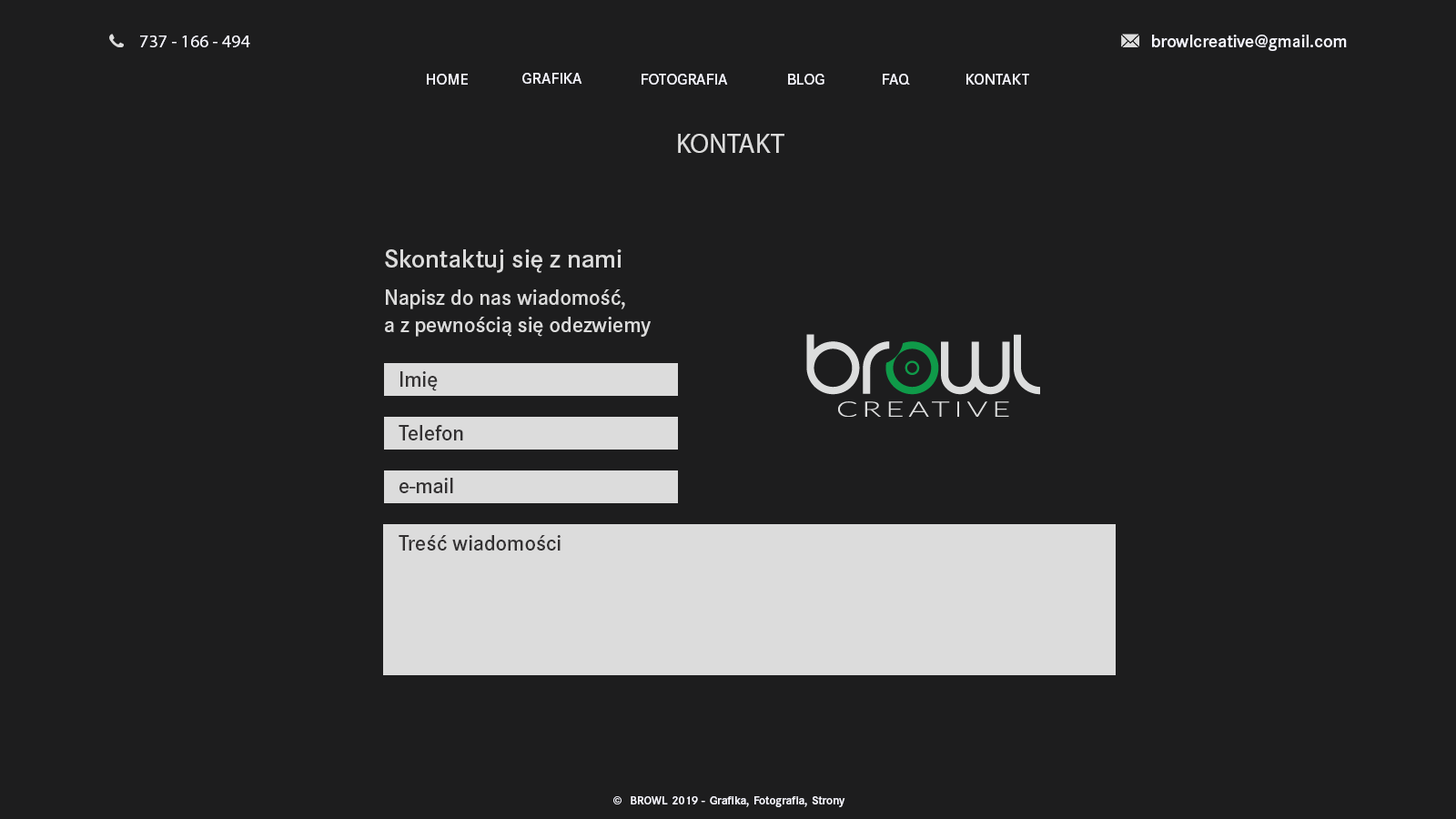
<style>
.page{position:relative;width:1456px;height:819px;background:#1d1d1e}
.page>*{position:absolute;margin:0}
.t1{font:18.2px "MyriadPro-Regular";color:#f7f7ff}
.t2{font:18.2px "CorporateSPro-Demi";color:#f7f7ff}
.t3{font:16.2px "CorporateSPro-Demi";color:#f7f7ff}
.t4{font:27.3px "MyriadPro-Regular";color:#dcdcdc}
.t5{font:26.5px "CorporateSPro-Demi";color:#dcdcdc}
.t6{font:21.8px/27.3px "CorporateSPro-Demi";color:#dcdcdc}
.t7{font:21.8px "CorporateSPro-Demi";color:#333132}
.t8{font:12px "CorporateSPro-Demi";color:#f7f7ff}
</style>
<div class="page">
<p class="t1" style="left:140px;top:35px;width:110px;height:12px">737 - 166 - 494</p>
<p class="t2" style="left:1152px;top:35px;width:195px;height:16px">browlcreative@gmail.com</p>
<p class="t3" style="left:427px;top:74px;width:41px;height:11px;text-align:justify">HOME<br>v</p>
<p class="t3" style="left:522px;top:73px;width:60px;height:11px">GRAFIKA</p>
<p class="t3" style="left:642px;top:74px;width:86px;height:11px">FOTOGRAFIA</p>
<p class="t3" style="left:788px;top:74px;width:36px;height:11px">BLOG</p>
<p class="t3" style="left:883px;top:74px;width:27px;height:11px">FAQ</p>
<p class="t3" style="left:966px;top:74px;width:63px;height:11px">KONTAKT</p>
<p class="t4" style="left:678px;top:134px;width:106px;height:19px">KONTAKT</p>
<p class="t5" style="left:385px;top:249px;width:237px;height:24px">Skontaktuj się z nami</p>
<p class="t6" style="left:385px;top:289px;width:266px;height:48px">Napisz do nas wiadomość, <br>a z pewnością się odezwiemy</p>
<p class="t7" style="left:400px;top:371px;width:38px;height:20px">Imię</p>
<p class="t7" style="left:399px;top:425px;width:64px;height:15px">Telefon</p>
<p class="t7" style="left:399px;top:478px;width:54px;height:15px">e-mail</p>
<p class="t7" style="left:399px;top:535px;width:162px;height:16px">Treść wiadomości</p>
<p class="t8" style="left:613px;top:796px;width:232px;height:11px;text-align:justify">©  BROWL 2019 - Grafika, Fotografia, Strony www<br>v</p>
</div>
